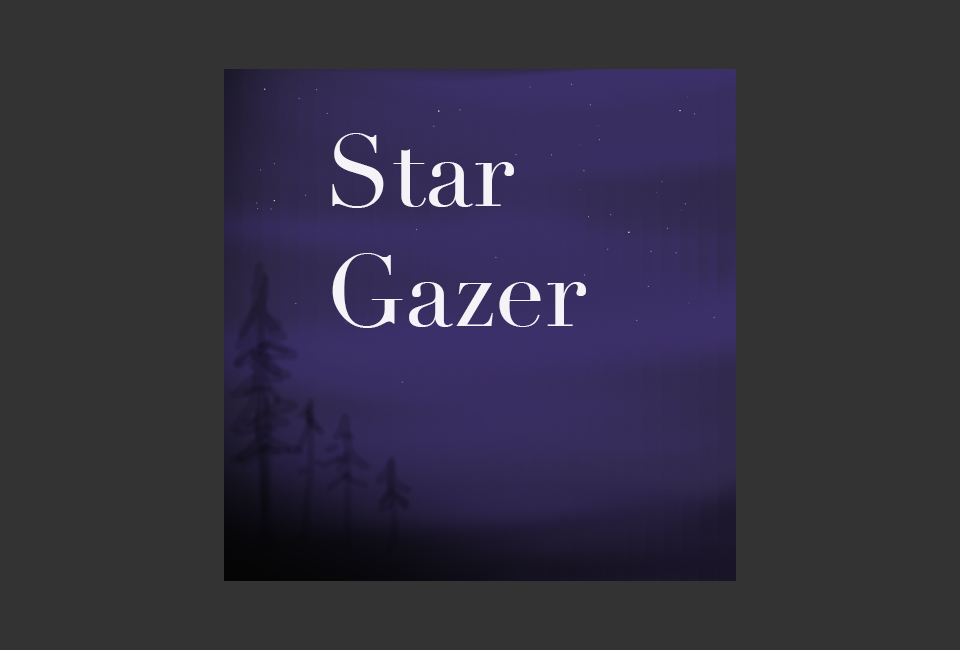
<style>
.page{position:relative;width:960px;height:650px;background:#333333}
.page>*{position:absolute;margin:0}
.t1{font:100px "Didot";color:#f5f3f8}
</style>
<div class="page">
<p class="t1" style="left:332px;top:133px;width:254px;height:195px">Star<br>Gazer</p>
</div>
